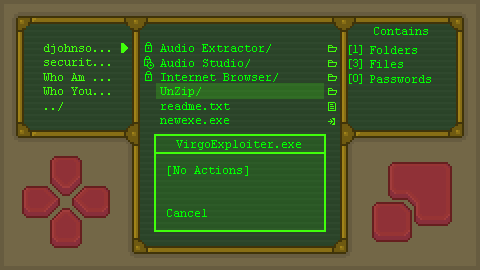
<style>
.page{position:relative;width:480px;height:270px;background:#736747}
.page>*{position:absolute;margin:0}
.t1{font:12px "CourierNewPSMT";color:#00ff00}
.t2{font:12px "CourierNewPSMT";color:#40ff0a}
</style>
<div class="page">
<p class="t1" style="left:374px;top:27px;width:54px;height:8px">Contains</p>
<p class="t2" style="left:43px;top:44px;width:67px;height:67px;text-align:right">djohnso...<br>securit...<br>Who Am ...<br>Who You...<br>../</p>
<p class="t1" style="left:160px;top:44px;width:118px;height:80px;text-align:right">Audio Extractor/<br>Audio Studio/<br>Internet Browser/<br>UnZip/<br>readme.txt<br>newexe.exe</p>
<p class="t1" style="left:176px;top:140px;width:125px;height:10px">VirgoExploiter.exe</p>
<p class="t1" style="left:167px;top:166px;width:81px;height:51px;text-align:right">[No Actions]<br><br><br>Cancel</p>
</div>
